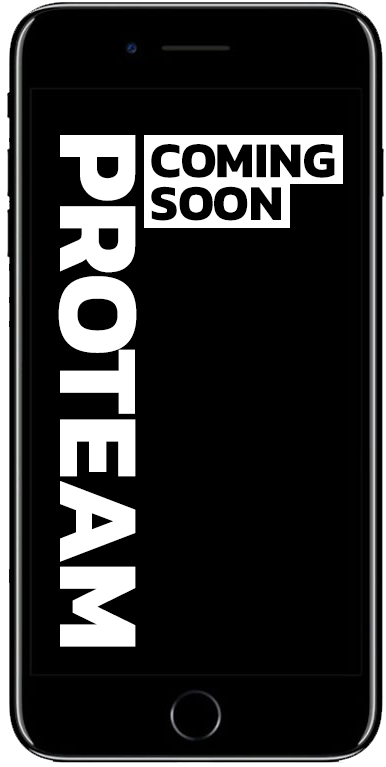
<style>
.page{position:relative;width:386px;height:767px;background:#000000}
.page>*{position:absolute;margin:0}
.t1{font:116.3px "Kanit-Bold";color:#ffffff}
.t2{font:50.7px/42.6px "Kanit-Bold";color:#000000}
</style>
<div class="page">
<p class="t1" style="left:58px;top:135px;width:79px;height:512px;rotate:90deg">PROTEAM</p>
<p class="t2" style="left:151px;top:144px;width:184px;height:77px;text-align:right">COMING<br>SOON</p>
</div>
